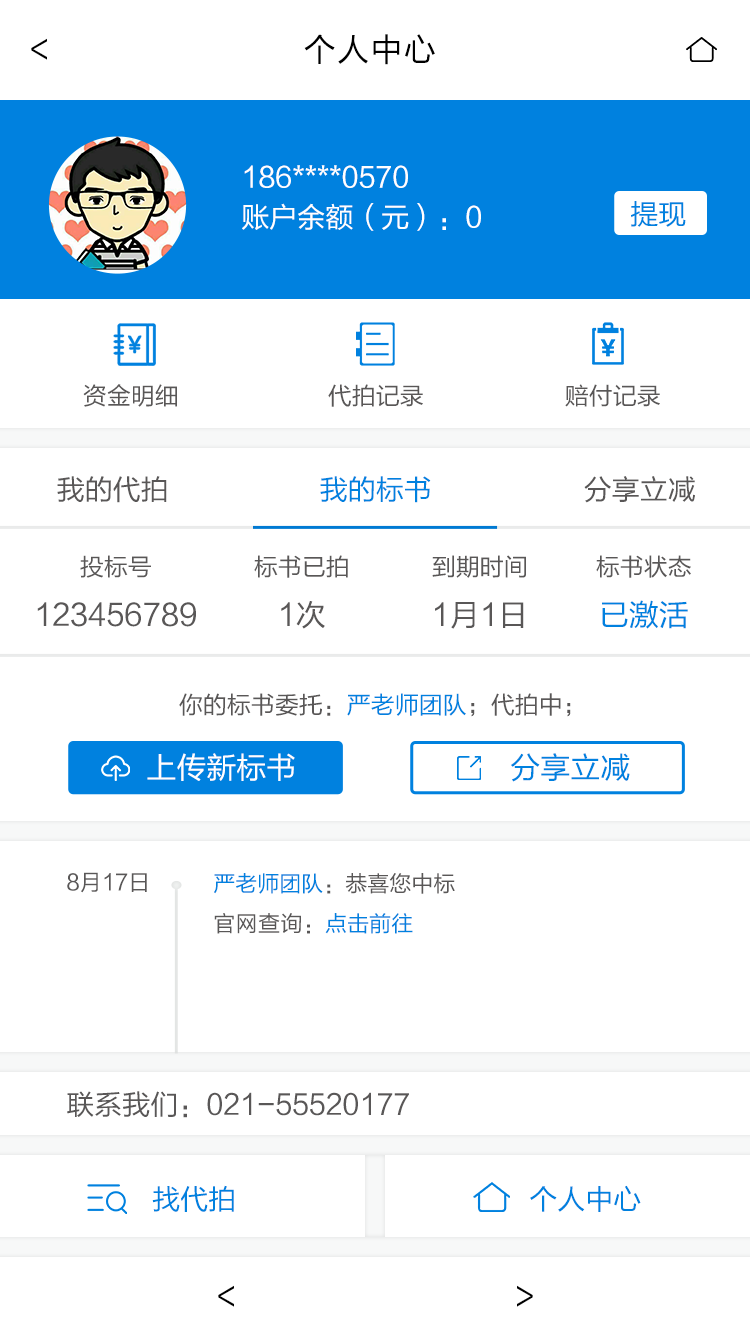
<style>
.page{position:relative;width:750px;height:1334px;background:#ffffff}
.page>*{position:absolute;margin:0}
.t1{font:30px "FZLTHJW--GB1-0";letter-spacing:0.05em;color:#000000}
.t2{font:32px "FZLTHJW--GB1-0";letter-spacing:0.05em;color:#000000}
.t3{font:28px/40px "FZLTHJW--GB1-0";color:#ffffff}
.t4{font:28px "FZLTHJW--GB1-0";color:#0081df}
.t5{font:24px "FZLTHJW--GB1-0";color:#595757}
.t6{font:28px "FZLTHJW--GB1-0";color:#595757}
.t7{font:30px "FZLTHJW--GB1-0";color:#595757}
.t8{font:30px "FZLTHJW--GB1-0";color:#0081df}
.t9{font:24px "FZLTHJW--GB1-0";color:#0081df}
.t10{font:30px "FZLTHJW--GB1-0";color:#ffffff}
.t11{font:22px "FZLTHJW--GB1-0";color:#595757}
.t12{font:22px/40px "FZLTHJW--GB1-0";color:#595757}
.t13{font:22px/40px "FZLTHJW--GB1-0";color:#0081df}
.t14{font:22px/40px "FZLTHJW--GB1-0";letter-spacing:0.02em;color:#595757}
</style>
<div class="page">
<p class="t1" style="left:31px;top:38px;width:16px;height:22px;rotate:180deg">&gt;</p>
<p class="t2" style="left:304px;top:34px;width:131px;height:31px">个人中心</p>
<p class="t3" style="left:242px;top:165px;width:239px;height:66px">186****0570<br>账户余额（元）：0</p>
<p class="t4" style="left:631px;top:201px;width:55px;height:26px">提现</p>
<p class="t5" style="left:83px;top:384px;width:94px;height:23px">资金明细</p>
<p class="t5" style="left:328px;top:384px;width:95px;height:23px">代拍记录</p>
<p class="t5" style="left:565px;top:384px;width:95px;height:23px">赔付记录</p>
<p class="t6" style="left:57px;top:476px;width:110px;height:27px">我的代拍</p>
<p class="t4" style="left:320px;top:476px;width:111px;height:27px">我的标书</p>
<p class="t6" style="left:584px;top:476px;width:111px;height:27px">分享立减</p>
<p class="t5" style="left:80px;top:555px;width:71px;height:23px">投标号</p>
<p class="t5" style="left:254px;top:555px;width:94px;height:23px">标书已拍</p>
<p class="t5" style="left:432px;top:555px;width:94px;height:23px">到期时间</p>
<p class="t5" style="left:596px;top:555px;width:95px;height:23px">标书状态</p>
<p class="t7" style="left:37px;top:602px;width:159px;height:25px">123456789</p>
<p class="t7" style="left:281px;top:601px;width:44px;height:28px">1次</p>
<p class="t7" style="left:435px;top:602px;width:89px;height:27px">1月1日</p>
<p class="t8" style="left:602px;top:600px;width:86px;height:29px">已激活</p>
<p class="t5" style="left:179px;top:693px;width:392px;height:24px">你的标书委托：<span class="t9">严老师团队</span>；代拍中；</p>
<p class="t10" style="left:147px;top:753px;width:148px;height:28px">上传新标书</p>
<p class="t8" style="left:511px;top:753px;width:119px;height:29px">分享立减</p>
<p class="t11" style="left:67px;top:872px;width:80px;height:21px">8月17日</p>
<p class="t12" style="left:214px;top:873px;width:241px;height:61px"><span class="t13">严老师团队</span>：恭喜您中标<br><span class="t14">官网查询</span>：<span class="t13">点击前往</span></p>
<p class="t6" style="left:67px;top:1091px;width:342px;height:27px">联系我们：021-55520177</p>
<p class="t4" style="left:152px;top:1185px;width:82px;height:27px">找代拍</p>
<p class="t4" style="left:530px;top:1185px;width:111px;height:27px">个人中心</p>
<p class="t1" style="left:218px;top:1285px;width:16px;height:22px;rotate:180deg">&gt;</p>
<p class="t1" style="left:517px;top:1285px;width:16px;height:22px">&gt;</p>
</div>
